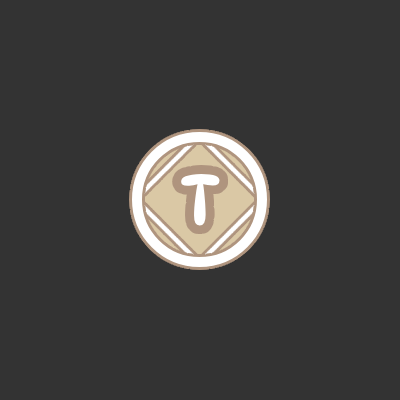
<style>
.page{position:relative;width:400px;height:400px;background:#333333}
.page>*{position:absolute;margin:0}
.t1{font:69.4px "DynaPuff-Regular";color:#ffffff}
</style>
<div class="page">
<p class="t1" style="left:181px;top:174px;width:39px;height:52px">T</p>
</div>
